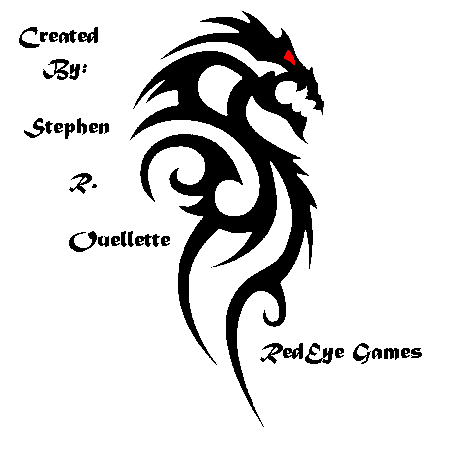
<style>
.page{position:relative;width:450px;height:450px;background:#ffffff}
.page>*{position:absolute;margin:0}
.t1{font:24px "MaturaMTScriptCapitals";color:#000000}
</style>
<div class="page">
<p class="t1" style="left:19px;top:27px;width:79px;height:21px">Created</p>
<p class="t1" style="left:43px;top:59px;width:44px;height:21px">By:</p>
<p class="t1" style="left:24px;top:118px;width:85px;height:21px">Stephen</p>
<p class="t1" style="left:69px;top:173px;width:28px;height:21px">R.</p>
<p class="t1" style="left:69px;top:231px;width:101px;height:21px">Ouellette</p>
<p class="t1" style="left:260px;top:343px;width:162px;height:21px">RedEye Games</p>
</div>
